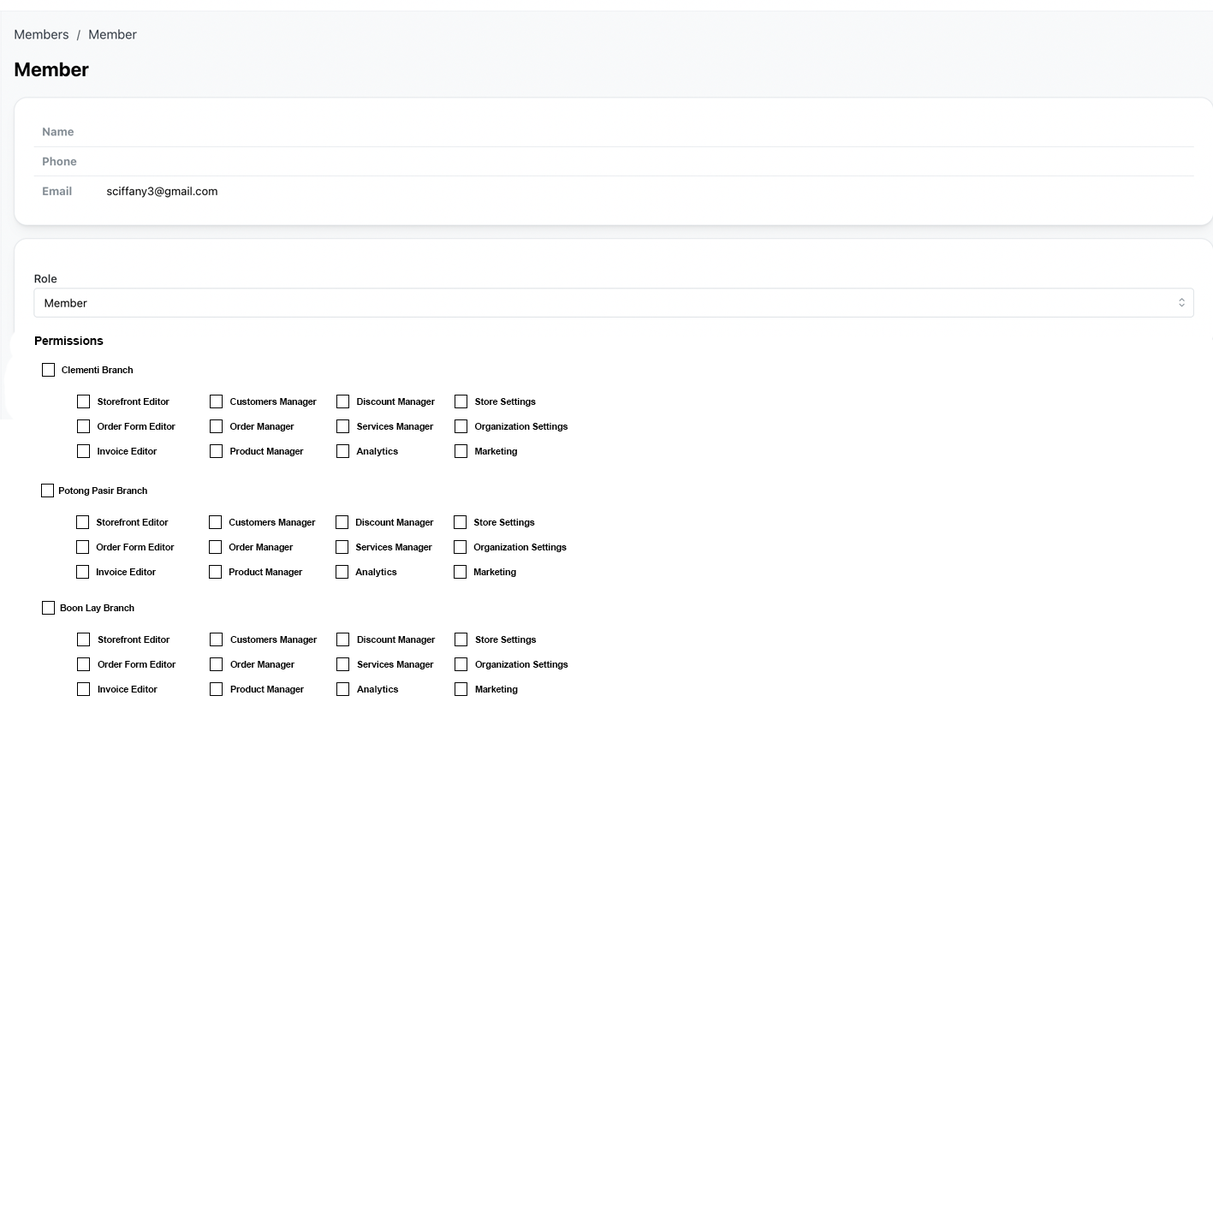
<style>
.page{position:relative;width:1213px;height:1213px;background:#ffffff}
.page>*{position:absolute;margin:0}
.t1{font:11.6px "Arial-BoldMT";color:#000000}
.t2{font:9px "Arial-BoldMT";color:#000000}
.t3{font:9px "Arial-BoldMT";letter-spacing:0.02em;color:#000000}
</style>
<div class="page">
<p class="t1" style="left:34px;top:336px;width:70px;height:9px">Permissions</p>
<p class="t2" style="left:62px;top:366px;width:71px;height:7px">Clementi Branch</p>
<p class="t2" style="left:98px;top:398px;width:71px;height:7px">Storefront Editor</p>
<p class="t2" style="left:230px;top:398px;width:87px;height:8px">Customers Manager</p>
<p class="t2" style="left:357px;top:398px;width:79px;height:8px">Discount Manager</p>
<p class="t2" style="left:475px;top:398px;width:61px;height:8px">Store Settings</p>
<p class="t2" style="left:97px;top:423px;width:78px;height:7px">Order Form Editor</p>
<p class="t2" style="left:229px;top:423px;width:65px;height:8px">Order Manager</p>
<p class="t2" style="left:357px;top:423px;width:77px;height:8px">Services Manager</p>
<p class="t2" style="left:474px;top:423px;width:94px;height:8px">Organization Settings</p>
<p class="t2" style="left:98px;top:448px;width:59px;height:6px">Invoice Editor</p>
<p class="t2" style="left:230px;top:448px;width:74px;height:8px">Product Manager</p>
<p class="t3" style="left:356px;top:448px;width:42px;height:8px">Analytics</p>
<p class="t2" style="left:475px;top:448px;width:42px;height:8px">Marketing</p>
<p class="t2" style="left:58px;top:487px;width:89px;height:8px">Potong Pasir Branch</p>
<p class="t2" style="left:96px;top:519px;width:73px;height:6px">Storefront Editor</p>
<p class="t2" style="left:228px;top:519px;width:88px;height:8px">Customers Manager</p>
<p class="t2" style="left:355px;top:519px;width:79px;height:8px">Discount Manager</p>
<p class="t2" style="left:473px;top:519px;width:62px;height:8px">Store Settings</p>
<p class="t2" style="left:96px;top:543px;width:79px;height:7px">Order Form Editor</p>
<p class="t2" style="left:228px;top:543px;width:66px;height:9px">Order Manager</p>
<p class="t2" style="left:355px;top:543px;width:77px;height:9px">Services Manager</p>
<p class="t2" style="left:473px;top:543px;width:93px;height:9px">Organization Settings</p>
<p class="t2" style="left:96px;top:568px;width:61px;height:7px">Invoice Editor</p>
<p class="t2" style="left:228px;top:568px;width:75px;height:9px">Product Manager</p>
<p class="t3" style="left:355px;top:568px;width:42px;height:9px">Analytics</p>
<p class="t2" style="left:473px;top:568px;width:43px;height:9px">Marketing</p>
<p class="t2" style="left:60px;top:604px;width:74px;height:9px">Boon Lay Branch</p>
<p class="t2" style="left:98px;top:636px;width:72px;height:7px">Storefront Editor</p>
<p class="t2" style="left:230px;top:636px;width:87px;height:8px">Customers Manager</p>
<p class="t2" style="left:357px;top:636px;width:79px;height:8px">Discount Manager</p>
<p class="t2" style="left:475px;top:636px;width:62px;height:8px">Store Settings</p>
<p class="t2" style="left:98px;top:661px;width:78px;height:6px">Order Form Editor</p>
<p class="t2" style="left:230px;top:661px;width:65px;height:8px">Order Manager</p>
<p class="t2" style="left:357px;top:661px;width:77px;height:8px">Services Manager</p>
<p class="t2" style="left:475px;top:661px;width:93px;height:8px">Organization Settings</p>
<p class="t2" style="left:98px;top:685px;width:59px;height:7px">Invoice Editor</p>
<p class="t2" style="left:230px;top:685px;width:75px;height:9px">Product Manager</p>
<p class="t3" style="left:357px;top:685px;width:42px;height:9px">Analytics</p>
<p class="t2" style="left:475px;top:685px;width:43px;height:9px">Marketing</p>
</div>
